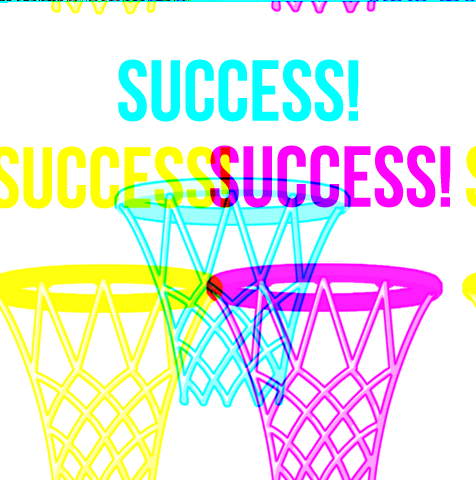
<style>
.page{position:relative;width:476px;height:480px;background:#ffffff}
.page>*{position:absolute;margin:0}
.t1{font:86px "BebasNeueBold";color:#00ffff}
</style>
<div class="page">
<p class="t1" style="left:118px;top:57px;width:241px;height:63px">SUCCESS!</p>
</div>
